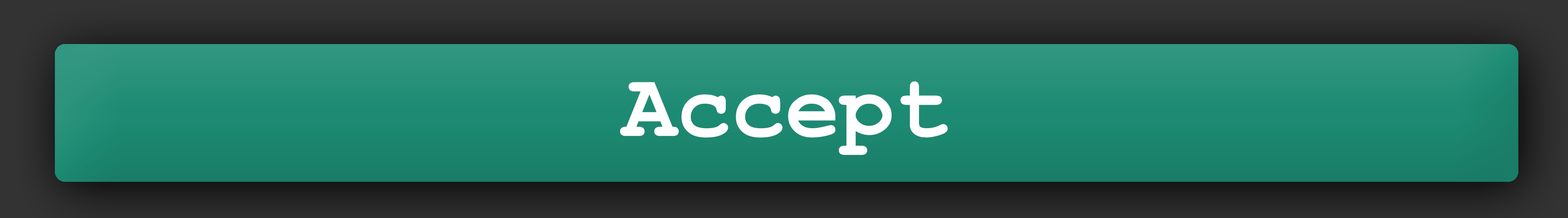
<style>
.page{position:relative;width:1568px;height:218px}
.page>*{position:absolute;margin:0}
.t1{font:90.6px "CourierNewPS-BoldMT";color:#ffffff}
</style>
<div class="page">
<p class="t1" style="left:620px;top:81px;width:328px;height:74px">Accept</p>
</div>
